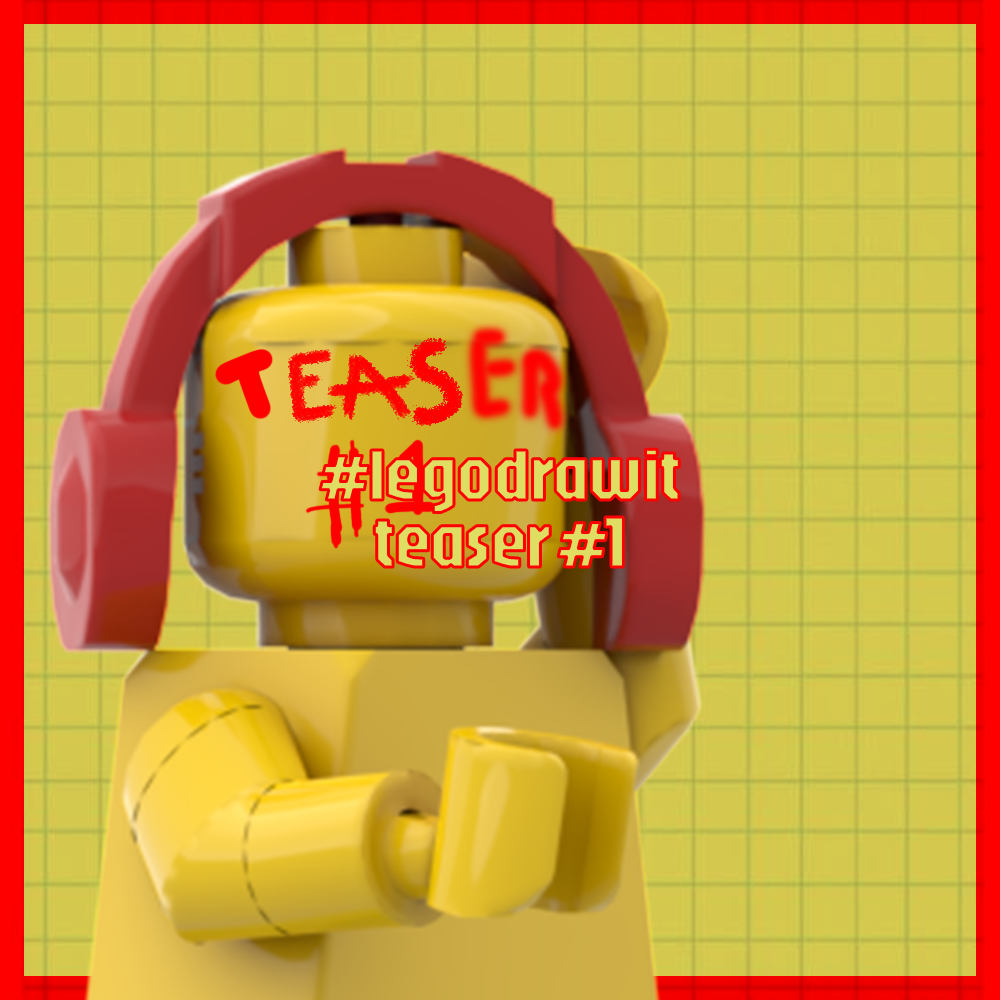
<style>
.page{position:relative;width:1000px;height:1000px}
.page>*{position:absolute;margin:0}
.t1{font:75px "JaroRegular-Regular";letter-spacing:-0.04em;color:#dfde62}
</style>
<div class="page">
<p class="t1" style="left:320px;top:449px;width:360px;height:64px">#legodrawit</p>
<p class="t1" style="left:374px;top:517px;width:250px;height:50px">teaser #1</p>
</div>
